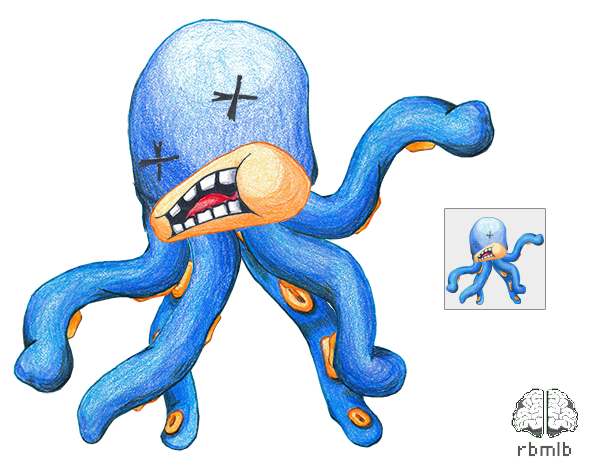
<style>
.page{position:relative;width:600px;height:468px;background:#ffffff}
.page>*{position:absolute;margin:0}
.t1{font:26px "Pixelade";letter-spacing:0.04em;color:#585858}
</style>
<div class="page">
<p class="t1" style="left:517px;top:441px;width:55px;height:16px">rbmlb</p>
</div>
